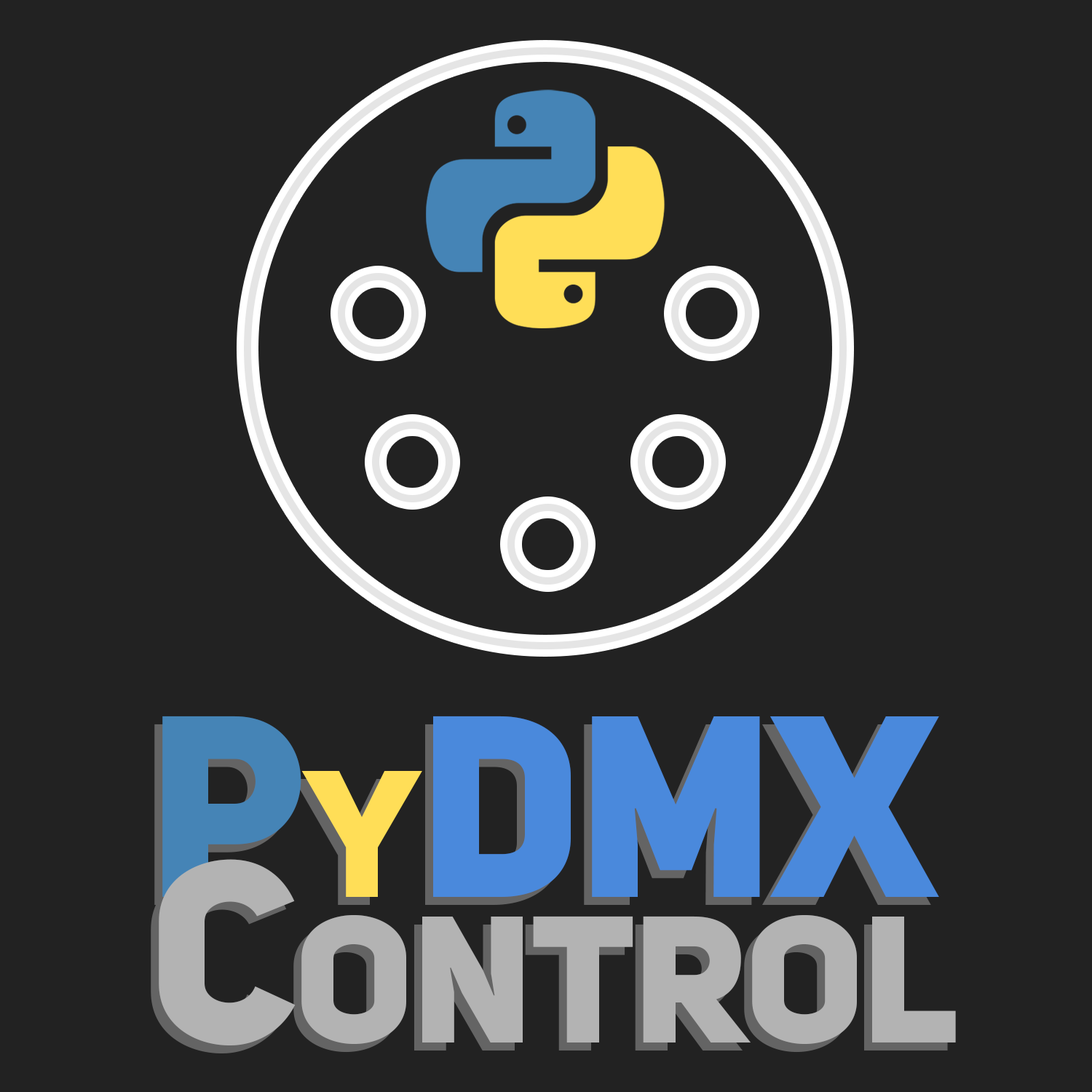
<style>
.page{position:relative;width:1092px;height:1092px;background:#222222}
.page>*{position:absolute;margin:0}
.t1{font:254.8px/145.6px "UniSansHeavyCAPS";letter-spacing:-0.01em;color:#b3b3b3;font-variant:small-caps}
.t2{font:254.8px/145.6px "UniSansHeavyCAPS";letter-spacing:-0.01em;color:#4584b6;font-variant:small-caps}
.t3{font:254.8px/145.6px "UniSansHeavyCAPS";letter-spacing:-0.01em;color:#ffde57;font-variant:small-caps}
.t4{font:254.8px/145.6px "UniSansHeavyCAPS";letter-spacing:-0.01em;color:#4a89dc;font-variant:small-caps}
</style>
<div class="page">
<p class="t1" style="left:159px;top:716px;width:797px;height:329px;text-align:center"><span class="t2">P</span><span class="t3">y</span><span class="t4">DMX<br> </span>Control</p>
</div>
